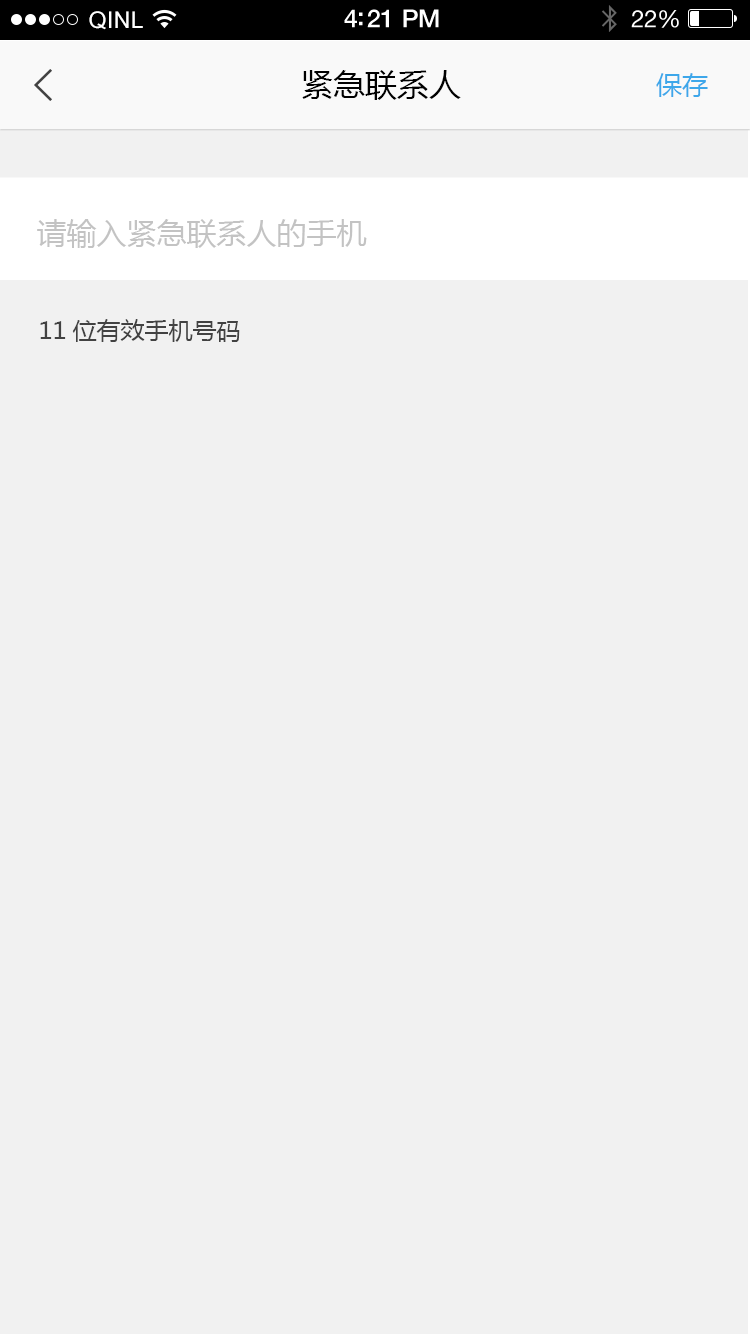
<style>
.page{position:relative;width:750px;height:1334px;background:#f1f1f1}
.page>*{position:absolute;margin:0}
.t1{font:23px "ArialUnicodeMS";letter-spacing:0.02em;color:#ffffff}
.t2{font:25px "HelveticaNeue-Medium";letter-spacing:-0.02em;color:#ffffff}
.t3{font:24px "HelveticaNeue";letter-spacing:-0.02em;color:#ffffff}
.t4{font:32px "MicrosoftYaHei";color:#000000}
.t5{font:26px "MicrosoftYaHei";color:#3da7ea}
.t6{font:30px "MicrosoftYaHei";color:#c3c3c3}
.t7{font:24px "MicrosoftYaHei";color:#424242}
</style>
<div class="page">
<p class="t1" style="left:89px;top:11px;width:54px;height:19px">QINL</p>
<p class="t2" style="left:344px;top:9px;width:95px;height:19px">4:21 PM</p>
<p class="t3" style="left:631px;top:10px;width:48px;height:18px">22%</p>
<p class="t4" style="left:302px;top:70px;width:159px;height:30px">紧急联系人</p>
<p class="t5" style="left:656px;top:73px;width:52px;height:24px">保存</p>
<p class="t6" style="left:37px;top:219px;width:330px;height:29px">请输入紧急联系人的手机</p>
<p class="t7" style="left:40px;top:319px;width:200px;height:23px">11位有效手机号码</p>
</div>
